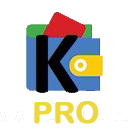
<style>
.page{position:relative;width:130px;height:133px;background:#ffffff}
.page>*{position:absolute;margin:0}
.t1{font:30px "ArialRoundedMTBold";color:#eed73b;font-weight:bold}
</style>
<div class="page">
<p class="t1" style="left:34px;top:101px;width:65px;height:23px">PRO</p>
</div>
